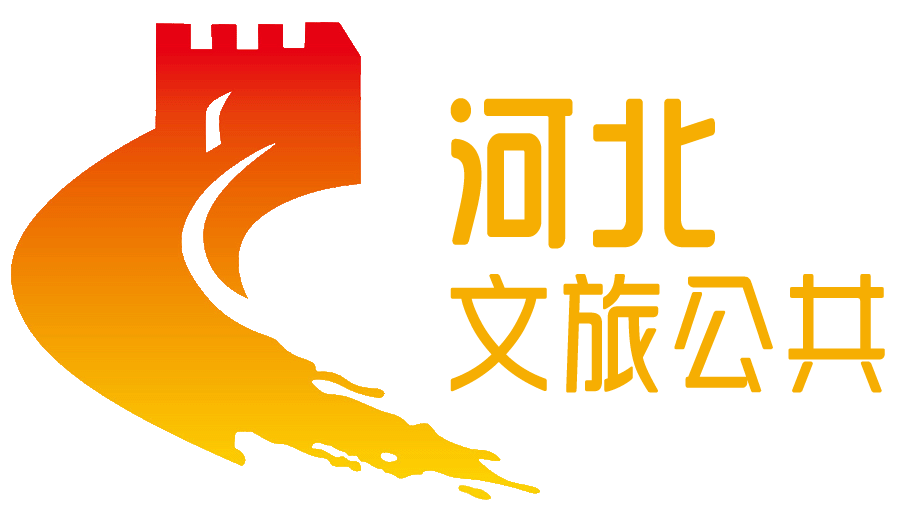
<style>
.page{position:relative;width:910px;height:512px;background:#ffffff}
.page>*{position:absolute;margin:0}
.t1{font:160px "SJyunlvyuan";letter-spacing:0.02em;color:#f6ae02;font-weight:bold;scale:0.85 1}
.t2{font:130px "SJyunlvyuan";letter-spacing:0.02em;color:#f6ae02;scale:0.85 1}
</style>
<div class="page">
<p class="t1" style="left:450px;top:98px;width:265px;height:151px">河北</p>
<p class="t2" style="left:450px;top:274px;width:435px;height:119px">文旅公共</p>
</div>
